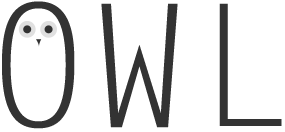
<style>
.page{position:relative;width:285px;height:132px;background:#ffffff}
.page>*{position:absolute;margin:0}
.t1{font:169.9px "LetterGothicStd";color:#333333}
</style>
<div class="page">
<p class="t1" style="left:2px;top:1px;width:280px;height:128px">OWL</p>
</div>
